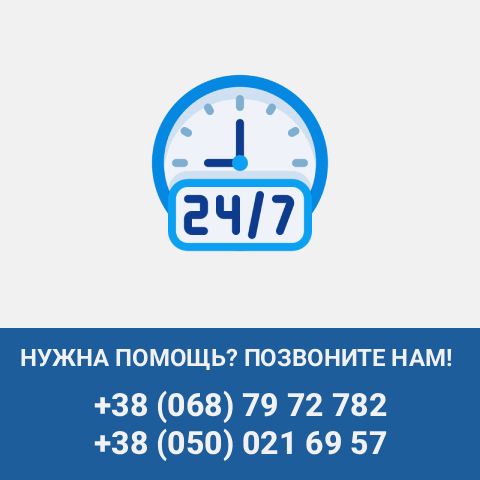
<style>
.page{position:relative;width:480px;height:480px;background:#f1f1f1}
.page>*{position:absolute;margin:0}
.t1{font:24px "Roboto-Bold";color:#f1f1f1}
.t2{font:32px "Roboto-ExtraBold";color:#f1f1f1}
</style>
<div class="page">
<p class="t1" style="left:21px;top:348px;width:431px;height:22px">НУЖНА ПОМОЩЬ? ПОЗВОНИТЕ НАМ!</p>
<p class="t2" style="left:94px;top:390px;width:293px;height:71px">+38 (068) 79 72 782<br>+38 (050) 021 69 57</p>
</div>
